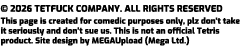
<style>
.page{position:relative;width:240px;height:48px;background:#ffffff}
.page>*{position:absolute;margin:0}
.t1{font:9px "Exo-ExtraBold";letter-spacing:0.005em;color:#000000}
.t2{font:8.2px "Exo-ExtraBold";letter-spacing:0.005em;color:#000000}
</style>
<div class="page">
<p class="t1" style="left:0px;top:5px;width:223px;height:7px">© 2026 TETFUCK COMPANY. ALL RIGHTS RESERVED</p>
<p class="t2" style="left:0px;top:17px;width:240px;height:29px">This page is created for comedic purposes only, plz don’t take<br>it seriously and don’t sue us. This is not an official Tetris<br>product. Site design by MEGAUpload (Mega Ltd.)</p>
</div>
